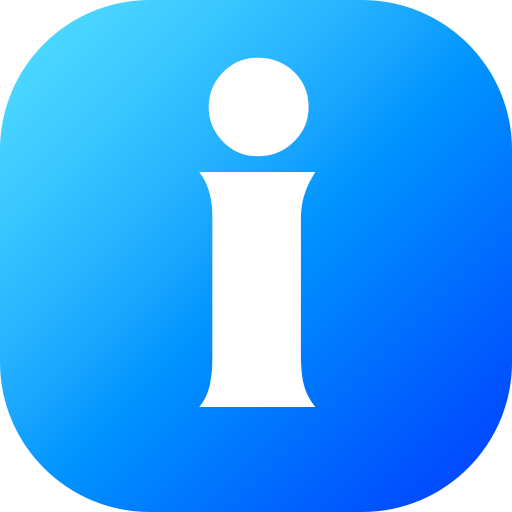
<style>
.page{position:relative;width:512px;height:512px}
.page>*{position:absolute;margin:0}
.t1{font:472.7px "UTM-Alberta-Heavy";letter-spacing:0.18em;color:#ffffff}
</style>
<div class="page">
<p class="t1" style="left:199px;top:57px;width:117px;height:350px">i</p>
</div>
